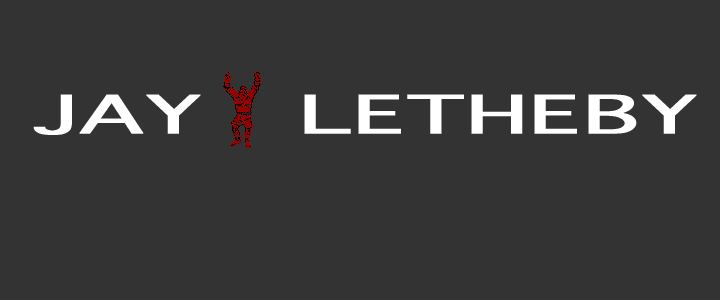
<style>
.page{position:relative;width:720px;height:300px;background:#333333}
.page>*{position:absolute;margin:0}
.t1{font:50.9px "Geneva";color:#ffffff;font-weight:bold;scale:1.75 1}
</style>
<div class="page">
<p class="t1" style="left:33px;top:94px;width:664px;height:41px">JAY   LETHEBY</p>
</div>
